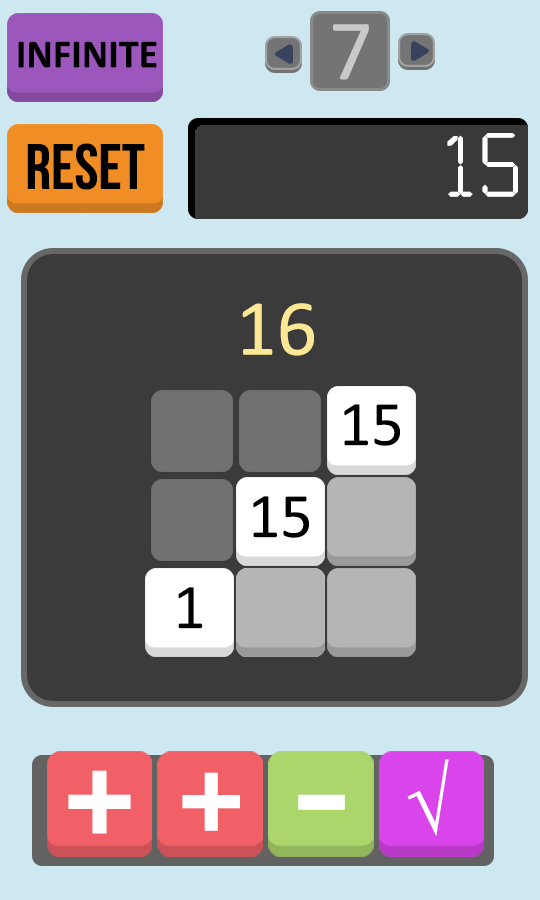
<style>
.page{position:relative;width:540px;height:900px;background:#3b3b3b}
.page>*{position:absolute;margin:0}
.t1{font:86.7px "Calibri";color:#c9c9c9}
.t2{font:40px "Calibri-Bold";color:#000000}
.t3{font:100.4px "Calculator";color:#ffffff;scale:1.04 1}
.t4{font:64px "BebasNeue";color:#000000}
.t5{font:80px "Calibri";color:#fce795}
.t6{font:64px "Calibri";color:#000000}
.t7{font:80px "TimesNewRomanPSMT";color:#ffffff}
.t8{font:178.6px "BebasNeue";color:#ffffff}
.t9{font:165.4px "BebasNeue";color:#ffffff}
.t10{font:146.6px "BebasNeue";color:#ffffff;scale:1.58 1}
</style>
<div class="page">
<p class="t1" style="left:333px;top:24px;width:36px;height:56px">70</p>
<p class="t2" style="left:18px;top:41px;width:139px;height:27px">INFINITE</p>
<p class="t3" style="left:447px;top:133px;width:71px;height:64px">15</p>
<p class="t4" style="left:27px;top:143px;width:118px;height:47px">RESET</p>
<p class="t5" style="left:242px;top:303px;width:72px;height:53px">16</p>
<p class="t6" style="left:344px;top:404px;width:56px;height:42px">15</p>
<p class="t6" style="left:253px;top:496px;width:56px;height:42px">15</p>
<p class="t6" style="left:178px;top:587px;width:25px;height:42px">1</p>
<p class="t7" style="left:407px;top:759px;width:42px;height:77px">√</p>
<p class="t8" style="left:68px;top:770px;width:63px;height:64px">+</p>
<p class="t9" style="left:182px;top:772px;width:58px;height:59px">+</p>
<p class="t10" style="left:298px;top:794px;width:47px;height:16px">-</p>
</div>
